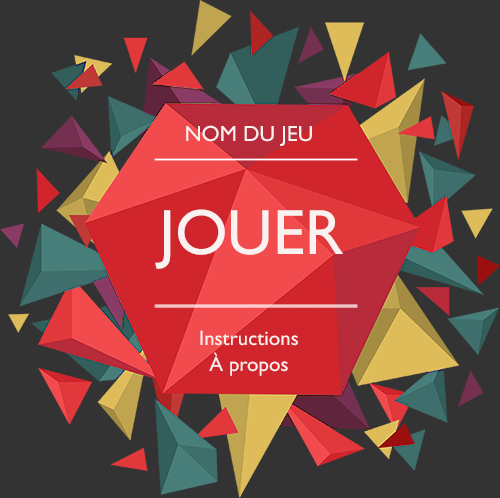
<style>
.page{position:relative;width:500px;height:498px;background:#333333}
.page>*{position:absolute;margin:0}
.t1{font:22px "GillSansMT";color:#faf2f1}
.t2{font:63.9px "GillSansMT";color:#faf2f1}
.t3{font:20.8px "GillSansMT";color:#faf2f1}
</style>
<div class="page">
<p class="t1" style="left:186px;top:125px;width:126px;height:21px">NOM DU JEU</p>
<p class="t2" style="left:155px;top:209px;width:189px;height:60px">JOUER</p>
<p class="t3" style="left:200px;top:330px;width:98px;height:16px">Instructions</p>
<p class="t3" style="left:209px;top:352px;width:79px;height:24px">À propos</p>
</div>
